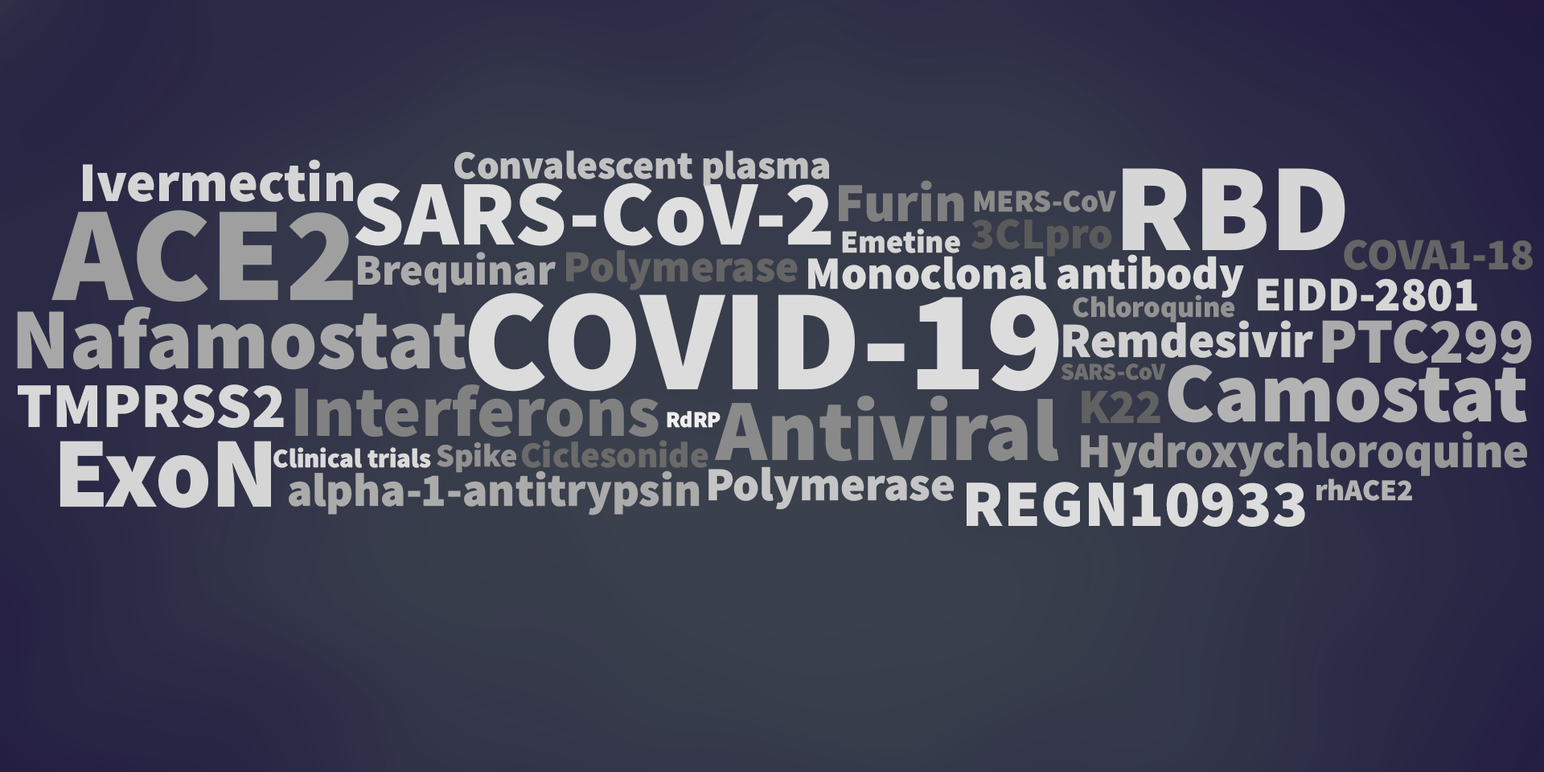
<style>
.page{position:relative;width:1544px;height:772px}
.page>*{position:absolute;margin:0}
.t1{font:56.3px "SourceSansRoman-Black";color:#d5d5d5}
.t2{font:39.9px "SourceSansRoman-Black";color:#c1c1c1}
.t3{font:125.4px "SourceSansRoman-Black";color:#d6d6d6}
.t4{font:92.6px "SourceSansRoman-Black";color:#dfdfdf}
.t5{font:55.3px "SourceSansRoman-Black";color:#7f7f7f}
.t6{font:31.5px "SourceSansRoman-Black";color:#8a8a8a}
.t7{font:135.4px "SourceSansRoman-Black";color:#9f9f9f}
.t8{font:44.4px "SourceSansRoman-Black";color:#5a5a5a}
.t9{font:32.3px "SourceSansRoman-Black";color:#d5d5d5}
.t10{font:44.8px "SourceSansRoman-Black";color:#656565}
.t11{font:44.4px "SourceSansRoman-Black";color:#ababab}
.t12{font:46.2px "SourceSansRoman-Black";color:#dcdcdc}
.t13{font:48.5px "SourceSansRoman-Black";color:#d6d6d6}
.t14{font:145.1px "SourceSansRoman-Black";color:#dcdcdc}
.t15{font:29.5px "SourceSansRoman-Black";color:#929292}
.t16{font:87.1px "SourceSansRoman-Black";color:#a8a8a8}
.t17{font:49.7px "SourceSansRoman-Black";color:#d0d0d0}
.t18{font:64.7px "SourceSansRoman-Black";color:#ababab}
.t19{font:24px "SourceSansRoman-Black";color:#707070}
.t20{font:85.3px "SourceSansRoman-Black";color:#b3b3b3}
.t21{font:64.1px "SourceSansRoman-Black";color:#d8d8d8}
.t22{font:72.6px "SourceSansRoman-Black";color:#818181}
.t23{font:87.6px "SourceSansRoman-Black";color:#8a8a8a}
.t24{font:49.3px "SourceSansRoman-Black";color:#616161}
.t25{font:22.6px "SourceSansRoman-Black";color:#eeeeee}
.t26{font:49px "SourceSansRoman-Black";color:#989898}
.t27{font:100.5px "SourceSansRoman-Black";color:#d5d5d5}
.t28{font:26.7px "SourceSansRoman-Black";color:#dadada}
.t29{font:32.7px "SourceSansRoman-Black";color:#929292}
.t30{font:36.6px "SourceSansRoman-Black";color:#6a6a6a}
.t31{font:47.2px "SourceSansRoman-Black";color:#ababab}
.t32{font:47.5px "SourceSansRoman-Black";color:#c5c5c5}
.t33{font:66.4px "SourceSansRoman-Black";color:#dcdcdc}
.t34{font:30.4px "SourceSansRoman-Black";color:#b3b3b3}
</style>
<div class="page">
<p class="t1" style="left:83px;top:159px;width:270px;height:43px">Ivermectin</p>
<p class="t2" style="left:454px;top:150px;width:375px;height:36px">Convalescent plasma</p>
<p class="t3" style="left:1123px;top:168px;width:223px;height:82px">RBD</p>
<p class="t4" style="left:355px;top:183px;width:477px;height:63px">SARS-CoV-2</p>
<p class="t5" style="left:839px;top:180px;width:125px;height:42px">Furin</p>
<p class="t6" style="left:974px;top:190px;width:142px;height:22px">MERS-CoV</p>
<p class="t7" style="left:51px;top:210px;width:302px;height:92px">ACE2</p>
<p class="t8" style="left:972px;top:219px;width:140px;height:38px">3CLpro</p>
<p class="t9" style="left:842px;top:228px;width:118px;height:25px">Emetine</p>
<p class="t10" style="left:1344px;top:240px;width:189px;height:30px">COVA1-18</p>
<p class="t11" style="left:358px;top:252px;width:198px;height:41px">Brequinar</p>
<p class="t10" style="left:566px;top:250px;width:232px;height:40px">Polymerase</p>
<p class="t12" style="left:808px;top:254px;width:436px;height:44px">Monoclonal antibody</p>
<p class="t13" style="left:1258px;top:278px;width:220px;height:33px">EIDD-2801</p>
<p class="t14" style="left:468px;top:293px;width:591px;height:99px">COVID-19</p>
<p class="t15" style="left:1073px;top:295px;width:162px;height:28px">Chloroquine</p>
<p class="t16" style="left:17px;top:306px;width:450px;height:64px">Nafamostat</p>
<p class="t17" style="left:1063px;top:320px;width:250px;height:38px">Remdesivir</p>
<p class="t18" style="left:1322px;top:319px;width:210px;height:45px">PTC299</p>
<p class="t19" style="left:1062px;top:364px;width:104px;height:16px">SARS-CoV</p>
<p class="t20" style="left:1168px;top:364px;width:359px;height:59px">Camostat</p>
<p class="t21" style="left:18px;top:384px;width:266px;height:44px">TMPRSS2</p>
<p class="t22" style="left:295px;top:384px;width:364px;height:53px">Interferons</p>
<p class="t23" style="left:714px;top:396px;width:345px;height:66px">Antiviral</p>
<p class="t24" style="left:1082px;top:391px;width:79px;height:33px">K22</p>
<p class="t25" style="left:667px;top:411px;width:54px;height:17px">RdRP</p>
<p class="t26" style="left:1081px;top:431px;width:446px;height:46px">Hydroxychloroquine</p>
<p class="t27" style="left:60px;top:441px;width:211px;height:67px">ExoN</p>
<p class="t28" style="left:273px;top:447px;width:158px;height:21px">Clinical trials</p>
<p class="t29" style="left:437px;top:442px;width:79px;height:31px">Spike</p>
<p class="t30" style="left:521px;top:440px;width:188px;height:28px">Ciclesonide</p>
<p class="t31" style="left:289px;top:471px;width:411px;height:45px">alpha-1-antitrypsin</p>
<p class="t32" style="left:709px;top:467px;width:246px;height:43px">Polymerase</p>
<p class="t33" style="left:967px;top:482px;width:338px;height:45px">REGN10933</p>
<p class="t34" style="left:1317px;top:479px;width:95px;height:22px">rhACE2</p>
</div>
